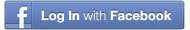
<style>
.page{position:relative;width:190px;height:30px}
.page>*{position:absolute;margin:0}
.t1{font:13px "HelveticaNeue-Bold"}
.t2{font:13px "HelveticaNeue-Light"}
.t3{font:13px "HelveticaNeue-Bold";color:#ffffff}
.t4{font:13px "HelveticaNeue-Light";color:#ffffff}
</style>
<div class="page">
<p class="t1" style="left:41px;top:9px;width:131px;height:13px">Log In<span class="t2"> with </span>Facebook</p>
<p class="t3" style="left:41px;top:10px;width:131px;height:13px">Log In<span class="t4"> with </span>Facebook</p>
</div>
